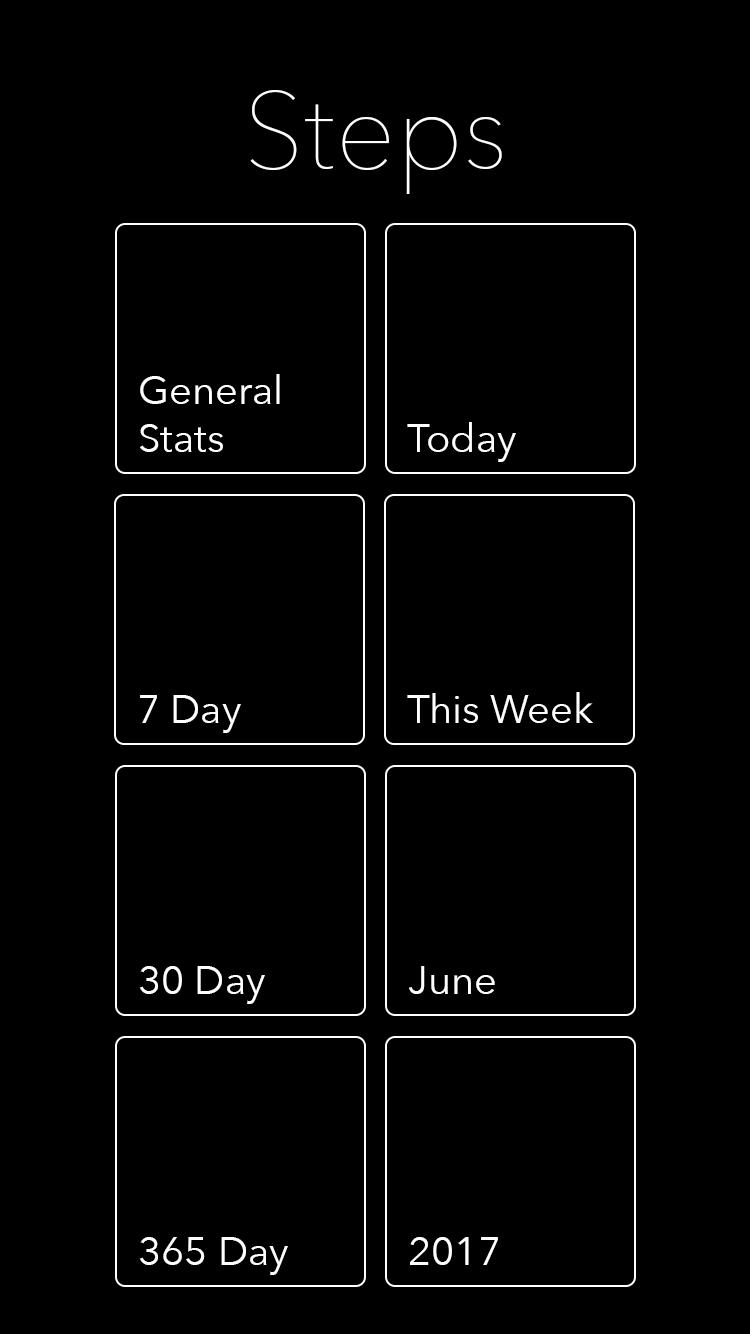
<style>
.page{position:relative;width:750px;height:1334px;background:#000000}
.page>*{position:absolute;margin:0}
.t1{font:107.1px "AvenirNext-UltraLight";color:#ffffff}
.t2{font:40px "AvenirNext-Regular";color:#ffffff}
</style>
<div class="page">
<p class="t1" style="left:250px;top:90px;width:252px;height:104px">Steps</p>
<p class="t2" style="left:140px;top:374px;width:140px;height:78px">General<br>Stats</p>
<p class="t2" style="left:407px;top:422px;width:109px;height:40px">Today</p>
<p class="t2" style="left:140px;top:695px;width:101px;height:38px">7 Day</p>
<p class="t2" style="left:407px;top:692px;width:186px;height:31px">This Week</p>
<p class="t2" style="left:139px;top:966px;width:126px;height:38px">30 Day</p>
<p class="t2" style="left:409px;top:966px;width:86px;height:28px">June</p>
<p class="t2" style="left:139px;top:1237px;width:149px;height:38px">365 Day</p>
<p class="t2" style="left:410px;top:1237px;width:88px;height:28px">2017</p>
</div>
